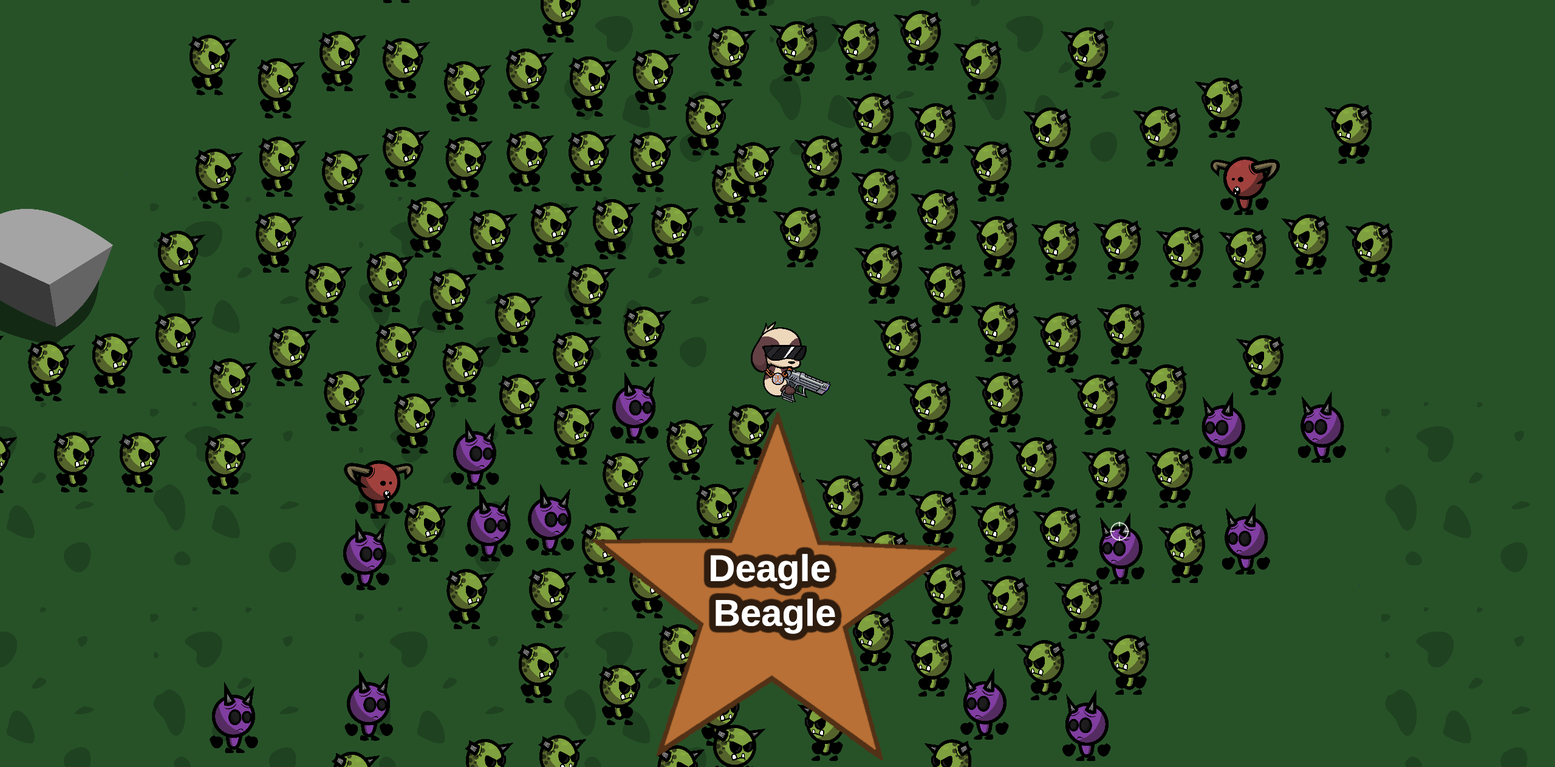
<style>
.page{position:relative;width:1555px;height:767px;background:#275228}
.page>*{position:absolute;margin:0}
.t1{font:37.3px "LiberationSans-Bold";color:#ffffff}
</style>
<div class="page">
<p class="t1" style="left:711px;top:554px;width:124px;height:80px;text-align:center">Deagle <br>Beagle</p>
</div>
